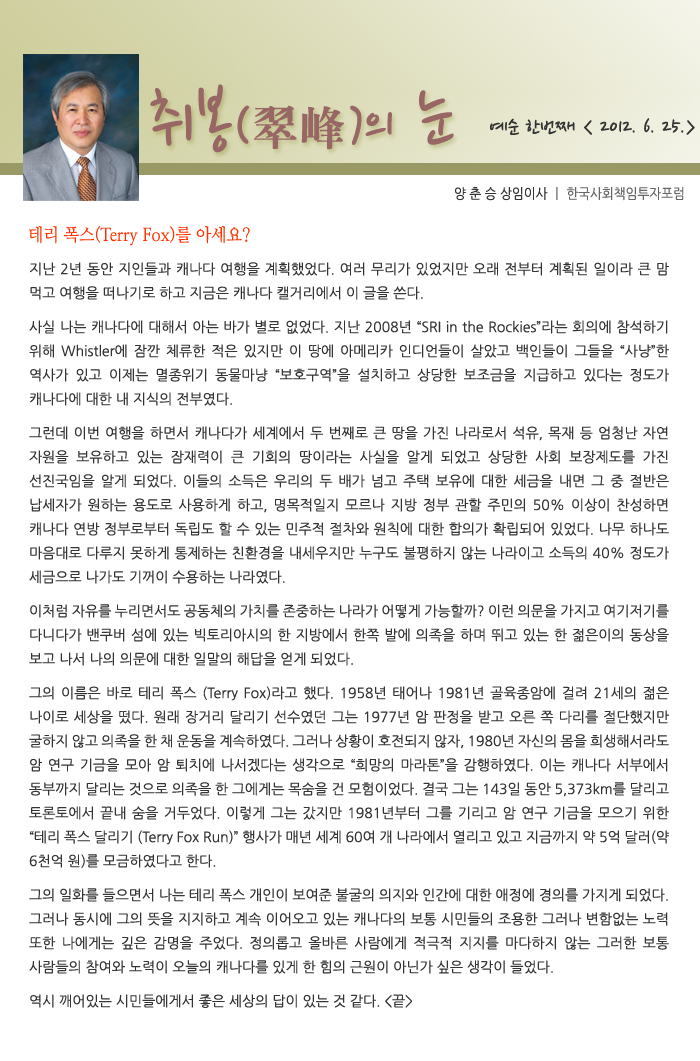
<style>
.page{position:relative;width:700px;height:1061px;background:#ffffff}
.page>*{position:absolute;margin:0}
.t1{font:77.5px "NanumPen";color:#996666}
.t2{font:60px "NanumPen";color:#996666}
.t3{font:48px "H2mjrE";color:#996666}
.t4{font:24px "NanumPen";color:#333333}
.t5{font:14px "NanumGothic";color:#666666;scale:0.9 1}
.t6{font:14px "NanumGothic";color:#333333;scale:0.9 1}
.t7{font:18px "NanumMyeongjo";color:#ff3300;scale:0.9 1}
.t8{font:14px/24px "NanumGothic";color:#333333}
</style>
<div class="page">
<p class="t1" style="left:150px;top:84px;width:304px;height:69px">취봉<span class="t2">(</span><span class="t3">翠峰</span><span class="t2">)</span><span class="t2">의</span> 눈</p>
<p class="t4" style="left:490px;top:118px;width:205px;height:17px">예순 한번째 &lt; 2012. 6. 25.&gt;</p>
<p class="t5" style="left:455px;top:187px;width:229px;height:14px"><span class="t6">양 춘 승 상임이사 </span>ㅣ 한국사회책임투자포럼</p>
<p class="t7" style="left:28px;top:226px;width:222px;height:20px">테리 폭스(Terry Fox)를 아세요?</p>
<p class="t8" style="left:29px;top:262px;width:640px;height:746px;text-align:justify">지난 2년 동안 지인들과 캐나다 여행을 계획했었다. 여러 무리가 있었지만 오래 전부터 계획된 일이라 큰 맘 먹고 여행을 떠나기로 하고 지금은 캐나다 캘거리에서 이 글을 쓴다.<br> <br>사실 나는 캐나다에 대해서 아는 바가 별로 없었다. 지난 2008년 “SRI in the Rockies”라는 회의에 참석하기 위해 Whistler에 잠깐 체류한 적은 있지만 이 땅에 아메리카 인디언들이 살았고 백인들이 그들을 “사냥”한 역사가 있고 이제는 멸종위기 동물마냥 “보호구역”을 설치하고 상당한 보조금을 지급하고 있다는 정도가 캐나다에 대한 내 지식의 전부였다.<br><br>그런데 이번 여행을 하면서 캐나다가 세계에서 두 번째로 큰 땅을 가진 나라로서 석유, 목재 등 엄청난 자연 자원을 보유하고 있는 잠재력이 큰 기회의 땅이라는 사실을 알게 되었고 상당한 사회 보장제도를 가진 선진국임을 알게 되었다. 이들의 소득은 우리의 두 배가 넘고 주택 보유에 대한 세금을 내면 그 중 절반은 납세자가 원하는 용도로 사용하게 하고, 명목적일지 모르나 지방 정부 관할 주민의 50% 이상이 찬성하면 캐나다 연방 정부로부터 독립도 할 수 있는 민주적 절차와 원칙에 대한 합의가 확립되어 있었다. 나무 하나도 마음대로 다루지 못하게 통제하는 친환경을 내세우지만 누구도 불평하지 않는 나라이고 소득의 40% 정도가 세금으로 나가도 기꺼이 수용하는 나라였다. <br><br>이처럼 자유를 누리면서도 공동체의 가치를 존중하는 나라가 어떻게 가능할까? 이런 의문을 가지고 여기저기를 다니다가 밴쿠버 섬에 있는 빅토리아시의 한 지방에서 한쪽 발에 의족을 하며 뛰고 있는 한 젊은이의 동상을 보고 나서 나의 의문에 대한 일말의 해답을 얻게 되었다.<br><br>그의 이름은 바로 테리 폭스 (Terry Fox)라고 했다. 1958년 태어나 1981년 골육종암에 걸려 21세의 젊은 나이로 세상을 떴다. 원래 장거리 달리기 선수였던 그는 1977년 암 판정을 받고 오른 쪽 다리를 절단했지만 굴하지 않고 의족을 한 채 운동을 계속하였다. 그러나 상황이 호전되지 않자, 1980년 자신의 몸을 희생해서라도 암 연구 기금을 모아 암 퇴치에 나서겠다는 생각으로 “희망의 마라톤”을 감행하였다. 이는 캐나다 서부에서 동부까지 달리는 것으로 의족을 한 그에게는 목숨을 건 모험이었다. 결국 그는 143일 동안 5,373km를 달리고 토론토에서 끝내 숨을 거두었다. 이렇게 그는 갔지만 1981년부터 그를 기리고 암 연구 기금을 모으기 위한 “테리 폭스 달리기 (Terry Fox Run)” 행사가 매년 세계 60여 개 나라에서 열리고 있고 지금까지 약 5억 달러(약 6천억 원)를 모금하였다고 한다.<br><br>그의 일화를 들으면서 나는 테리 폭스 개인이 보여준 불굴의 의지와 인간에 대한 애정에 경의를 가지게 되었다. 그러나 동시에 그의 뜻을 지지하고 계속 이어오고 있는 캐나다의 보통 시민들의 조용한 그러나 변함없는 노력 또한 나에게는 깊은 감명을 주었다. 정의롭고 올바른 사람에게 적극적 지지를 마다하지 않는 그러한 보통 사람들의 참여와 노력이 오늘의 캐나다를 있게 한 힘의 근원이 아닌가 싶은 생각이 들었다.<br><br>역시 깨어있는 시민들에게서 좋은 세상의 답이 있는 것 같다. &lt;끝&gt;</p>
</div>
